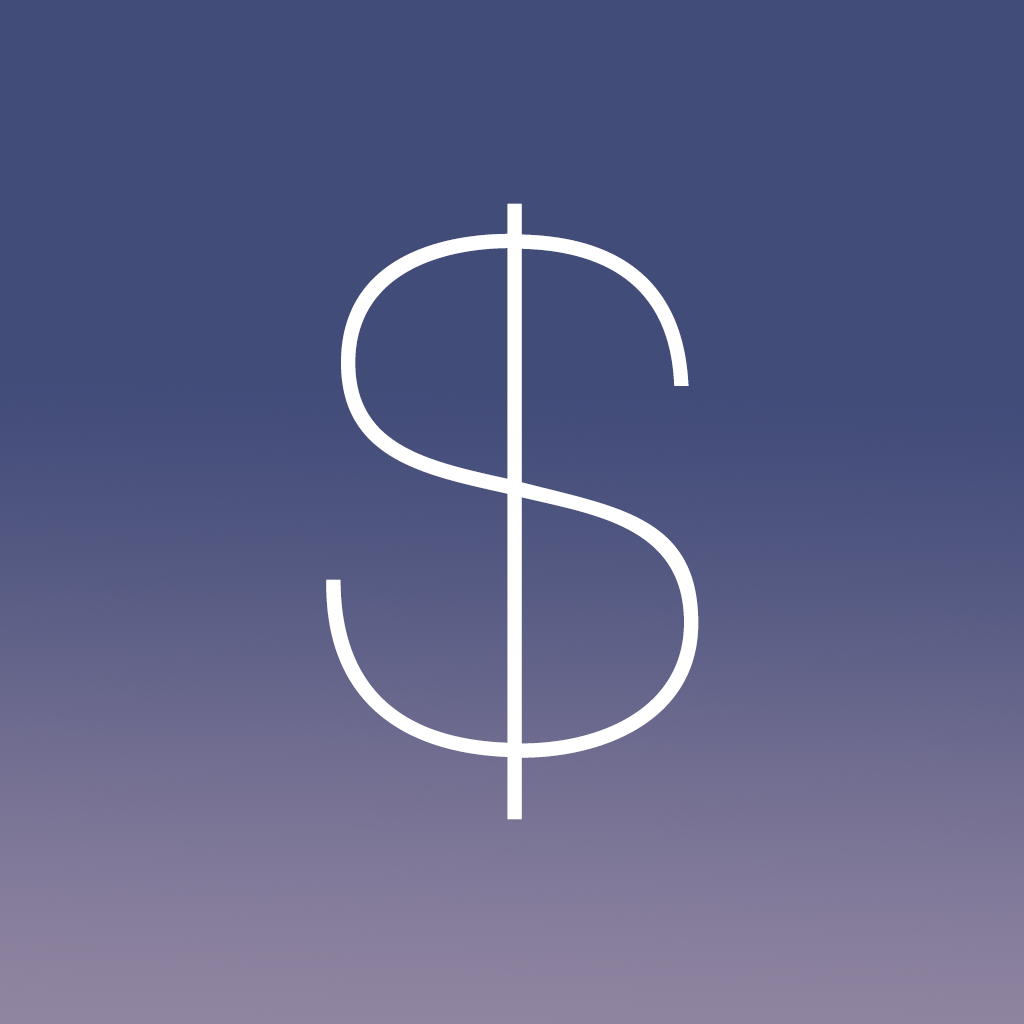
<style>
.page{position:relative;width:1024px;height:1024px;background:#424c79}
.page>*{position:absolute;margin:0}
.t1{font:700px "HelveticaNeue-UltraLight";letter-spacing:-0.02em;color:#ffffff}
</style>
<div class="page">
<p class="t1" style="left:326px;top:203px;width:373px;height:617px">$</p>
</div>
